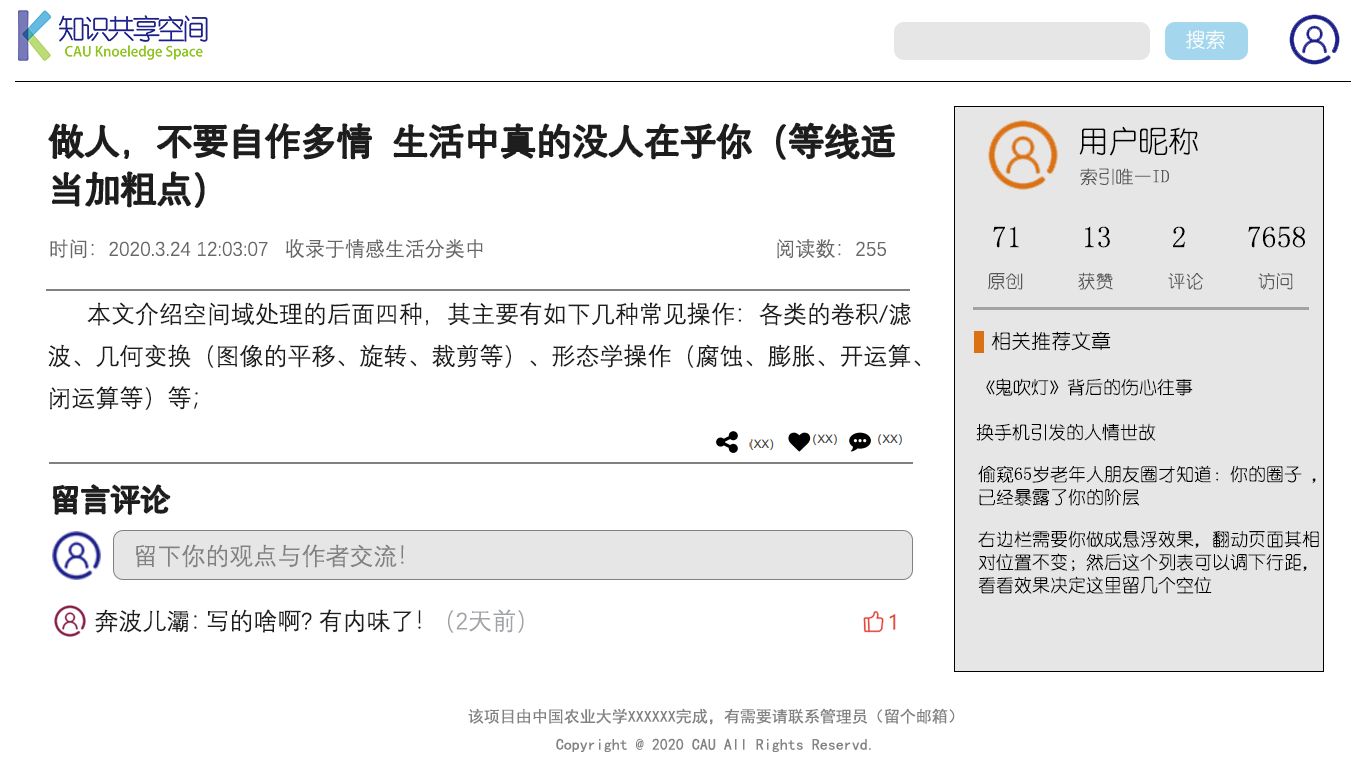
<style>
.page{position:relative;width:1366px;height:768px;background:#ffffff}
.page>*{position:absolute;margin:0}
.t1{font:20px "YouYuan";color:#ffffff}
.t2{font:36px/48px "DengXian";color:#1d1d1d}
.t3{font:30px "YouYuan";color:#000000}
.t4{font:18px "YouYuan";color:#575757}
.t5{font:20px "DengXian";color:#666768}
.t6{font:24px "DengXian";color:#1e1e1e}
.t7{font:20px "YouYuan";color:#000000}
.t8{font:18px "YouYuan";color:#000000}
.t9{font:18px/23px "YouYuan";color:#000000}
.t10{font:30px "DengXian";color:#1e1e1e}
.t11{font:24px "DengXian";color:#818181}
.t12{font:24px "DengXian";color:#a1a3a7}
.t13{font:16px "SimHei";color:#828282}
</style>
<div class="page">
<p class="t1" style="left:1185px;top:30px;width:40px;height:19px">搜索</p>
<p class="t2" style="left:49px;top:123px;width:846px;height:84px">做人，不要自作多情  生活中真的没人在乎你（等线适<br>当加粗点）</p>
<p class="t3" style="left:1079px;top:126px;width:119px;height:30px">用户昵称</p>
<p class="t4" style="left:1080px;top:168px;width:89px;height:18px">索引唯一ID</p>
<p class="t3" style="left:993px;top:226px;width:312px;height:22px">71    13    2    7658</p>
<p class="t5" style="left:50px;top:239px;width:836px;height:20px">时间：2020.3.24 12:03:07   收录于情感生活分类中                                                     阅读数：255</p>
<p class="t4" style="left:988px;top:272px;width:305px;height:18px">原创      获赞      评论      访问</p>
<p class="t6" style="left:48px;top:302px;width:873px;height:108px">本文介绍空间域处理的后面四种，其主要有如下几种常见操作：各类的卷积/滤<br>波、几何变换（图像的平移、旋转、裁剪等）、形态学操作（腐蚀、膨胀、开运算、<br>闭运算等）等；</p>
<p class="t7" style="left:991px;top:331px;width:120px;height:20px">相关推荐文章</p>
<p class="t8" style="left:986px;top:378px;width:207px;height:18px">《鬼吹灯》背后的伤心往事</p>
<p class="t8" style="left:976px;top:423px;width:180px;height:18px">换手机引发的人情世故</p>
<p class="t9" style="left:978px;top:465px;width:338px;height:41px">偷窥65岁老年人朋友圈才知道：你的圈子 ，<br>已经暴露了你的阶层</p>
<p class="t10" style="left:53px;top:485px;width:117px;height:29px">留言评论</p>
<p class="t9" style="left:978px;top:530px;width:341px;height:64px">右边栏需要你做成悬浮效果，翻动页面其相<br>对位置不变；然后这个列表可以调下行距，<br>看看效果决定这里留几个空位</p>
<p class="t11" style="left:136px;top:544px;width:268px;height:24px">留下你的观点与作者交流！</p>
<p class="t6" style="left:95px;top:609px;width:102px;height:24px">奔波儿灞：</p>
<p class="t6" style="left:207px;top:609px;width:214px;height:24px">写的啥啊? 有内味了！</p>
<p class="t12" style="left:448px;top:609px;width:76px;height:24px">（2天前）</p>
<p class="t13" style="left:468px;top:708px;width:487px;height:44px;text-align:center">该项目由中国农业大学XXXXXX完成，有需要请联系管理员（留个邮箱）<br>Copyright @ 2020 CAU All Rights Reservd.</p>
</div>
